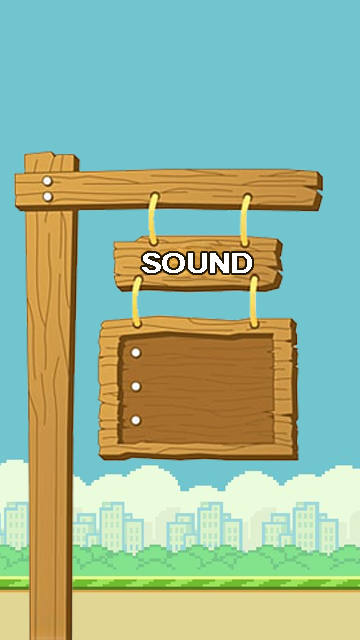
<style>
.page{position:relative;width:360px;height:640px;background:#71c5cf}
.page>*{position:absolute;margin:0}
.t1{font:27.8px "Arial-BoldMT";letter-spacing:-0.04em;color:#ffffff;text-transform:uppercase;scale:1.18 1}
</style>
<div class="page">
<p class="t1" style="left:142px;top:253px;width:110px;height:20px">SOUND</p>
</div>
